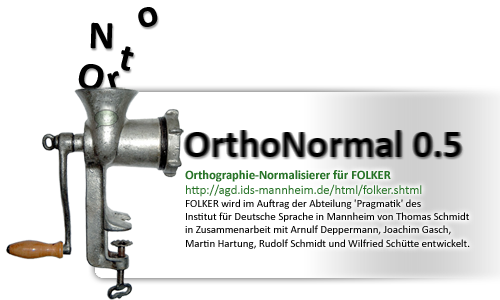
<style>
.page{position:relative;width:500px;height:300px;background:#ffffff}
.page>*{position:absolute;margin:0}
.t1{font:40px "Calibri-Bold";letter-spacing:-0.005em;color:#000000}
.t2{font:11px "Calibri";letter-spacing:-0.005em;color:#000000}
.t3{font:12.7px "Calibri-Bold";letter-spacing:-0.005em;color:#277327}
.t4{font:12.7px "Calibri";letter-spacing:-0.005em;color:#277327}
</style>
<div class="page">
<p class="t1" style="left:138px;top:7px;width:20px;height:20px;rotate:-16deg">o</p>
<p class="t1" style="left:90px;top:22px;width:23px;height:27px;rotate:1deg">N</p>
<p class="t1" style="left:121px;top:46px;width:13px;height:25px;rotate:14deg">t</p>
<p class="t1" style="left:78px;top:64px;width:26px;height:27px;rotate:14deg">O</p>
<p class="t1" style="left:107px;top:71px;width:12px;height:21px;rotate:-16deg">r</p>
<p class="t2" style="left:185px;top:170px;width:285px;height:79px"><span class="t3">Orthographie-Normalisierer für FOLKER<br></span><span class="t4">http://agd.ids-mannheim.de/html/folker.shtml<br></span>FOLKER wird im Auftrag der Abteilung 'Pragmatik' des <br>Institut für Deutsche Sprache in Mannheim von Thomas Schmidt <br>in Zusammenarbeit mit Arnulf Deppermann, Joachim Gasch, <br>Martin Hartung, Rudolf Schmidt und Wilfried Schütte entwickelt.</p>
</div>
